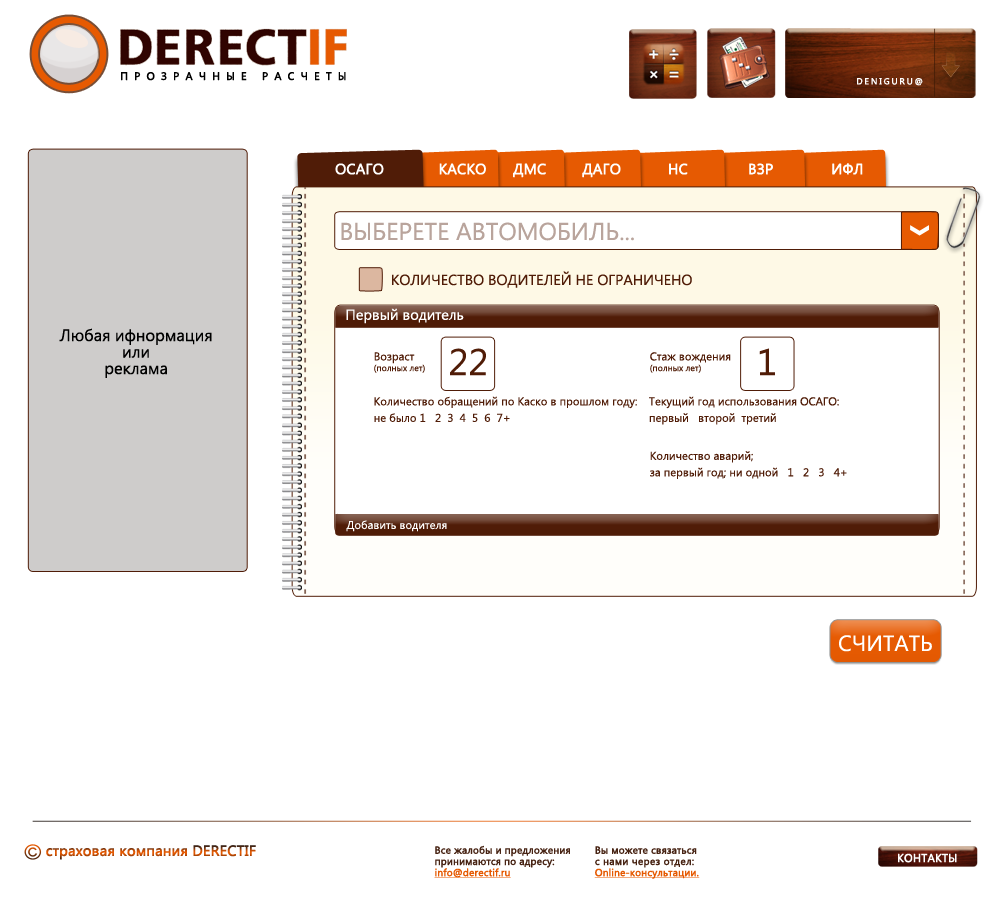
<style>
.page{position:relative;width:1000px;height:905px;background:#ffffff}
.page>*{position:absolute;margin:0}
.t1{font:10.8px "SegoeUI";letter-spacing:0.56em;color:#000000;font-weight:bold}
.t2{font:8.7px "SegoeUI";letter-spacing:0.2em;color:#ffffff;font-weight:bold}
.t3{font:14.6px "SegoeUI";letter-spacing:-0.005em;color:#ffffff;font-weight:bold}
.t4{font:24.3px "SegoeUI";color:#b9a49c}
.t5{font:14.6px "SegoeUI";color:#501c07}
.t6{font:14.6px "SegoeUI";color:#ffffff}
.t7{font:16.5px/16.5px "SegoeUI";color:#000000}
.t8{font:8.9px "SegoeUI";color:#501c07}
.t9{font:11.3px "SegoeUI";color:#501c07}
.t10{font:37px "SegoeUI";color:#501c07}
.t11{font:11.3px/16.5px "SegoeUI";color:#501c07}
.t12{font:11.3px "SegoeUI";color:#ffffff}
.t13{font:22px "SegoeUI";color:#ffffff}
.t14{font:14.6px "SegoeUI";letter-spacing:-0.005em;font-weight:bold}
.t15{font:10.1px/11.2px "SegoeUI";letter-spacing:-0.005em;color:#472313;font-weight:bold}
.t16{font:10.1px/11.2px "SegoeUI";letter-spacing:-0.005em;color:#e65a02;font-weight:bold;text-decoration:underline}
.t17{font:10.1px/11.2px "SegoeUI";letter-spacing:0.01em;color:#472313;font-weight:bold}
.t18{font:11.3px "SegoeUI";color:#ffffff;font-weight:bold}
</style>
<div class="page">
<p class="t1" style="left:121px;top:72px;width:225px;height:9px">ПРОЗРАЧНЫЕ РАСЧЕТЫ</p>
<p class="t2" style="left:857px;top:78px;width:66px;height:8px">DENIGURU@</p>
<p class="t3" style="left:335px;top:163px;width:49px;height:12px">ОСАГО</p>
<p class="t3" style="left:439px;top:163px;width:47px;height:12px">КАСКО</p>
<p class="t3" style="left:513px;top:163px;width:33px;height:15px">ДМС</p>
<p class="t3" style="left:582px;top:163px;width:39px;height:15px">ДАГО</p>
<p class="t3" style="left:669px;top:163px;width:19px;height:12px">НС</p>
<p class="t3" style="left:749px;top:163px;width:24px;height:12px">ВЗР</p>
<p class="t3" style="left:832px;top:163px;width:31px;height:12px">ИФЛ</p>
<p class="t4" style="left:341px;top:222px;width:293px;height:19px">ВЫБЕРЕТЕ АВТОМОБИЛЬ...</p>
<p class="t5" style="left:392px;top:271px;width:300px;height:17px">КОЛИЧЕСТВО ВОДИТЕЛЕЙ НЕ ОГРАНИЧЕНО</p>
<p class="t6" style="left:346px;top:308px;width:118px;height:16px">Первый водитель</p>
<p class="t7" style="left:59px;top:328px;width:153px;height:50px;text-align:center">Любая ифнормация<br>или<br>реклама</p>
<p class="t8" style="left:374px;top:352px;width:51px;height:21px"><span class="t9">Возраст<br></span>(полных лет)</p>
<p class="t10" style="left:450px;top:348px;width:36px;height:28px">22</p>
<p class="t9" style="left:650px;top:352px;width:81px;height:21px">Стаж вождения<br><span class="t8">(полных лет)</span></p>
<p class="t10" style="left:759px;top:348px;width:16px;height:28px">1</p>
<p class="t11" style="left:374px;top:396px;width:263px;height:26px">Количество обращений по Каско в прошлом году:<br>не было 1   2  3  4  5  6  7+</p>
<p class="t11" style="left:649px;top:396px;width:190px;height:29px">Текущий год использования ОСАГО:<br>первый   второй  третий</p>
<p class="t11" style="left:650px;top:451px;width:197px;height:28px">Количество аварий;<br>за первый год; ни одной   1   2   3   4+</p>
<p class="t12" style="left:346px;top:520px;width:101px;height:12px">Добавить водителя</p>
<p class="t13" style="left:839px;top:635px;width:93px;height:17px">СЧИТАТЬ</p>
<p class="t14" style="left:46px;top:845px;width:210px;height:15px">страховая компания DERECTIF</p>
<p class="t15" style="left:434px;top:845px;width:136px;height:33px">Все жалобы и предложения<br>принимаются по адресу:<br><span class="t16">info@derectif.ru</span></p>
<p class="t16" style="left:594px;top:846px;width:106px;height:33px"><span class="t15">Вы можете связаться<br></span><span class="t17">с нами через отдел:<br></span>Online-консультации.</p>
<p class="t18" style="left:898px;top:853px;width:59px;height:10px">КОНТАКТЫ</p>
</div>
